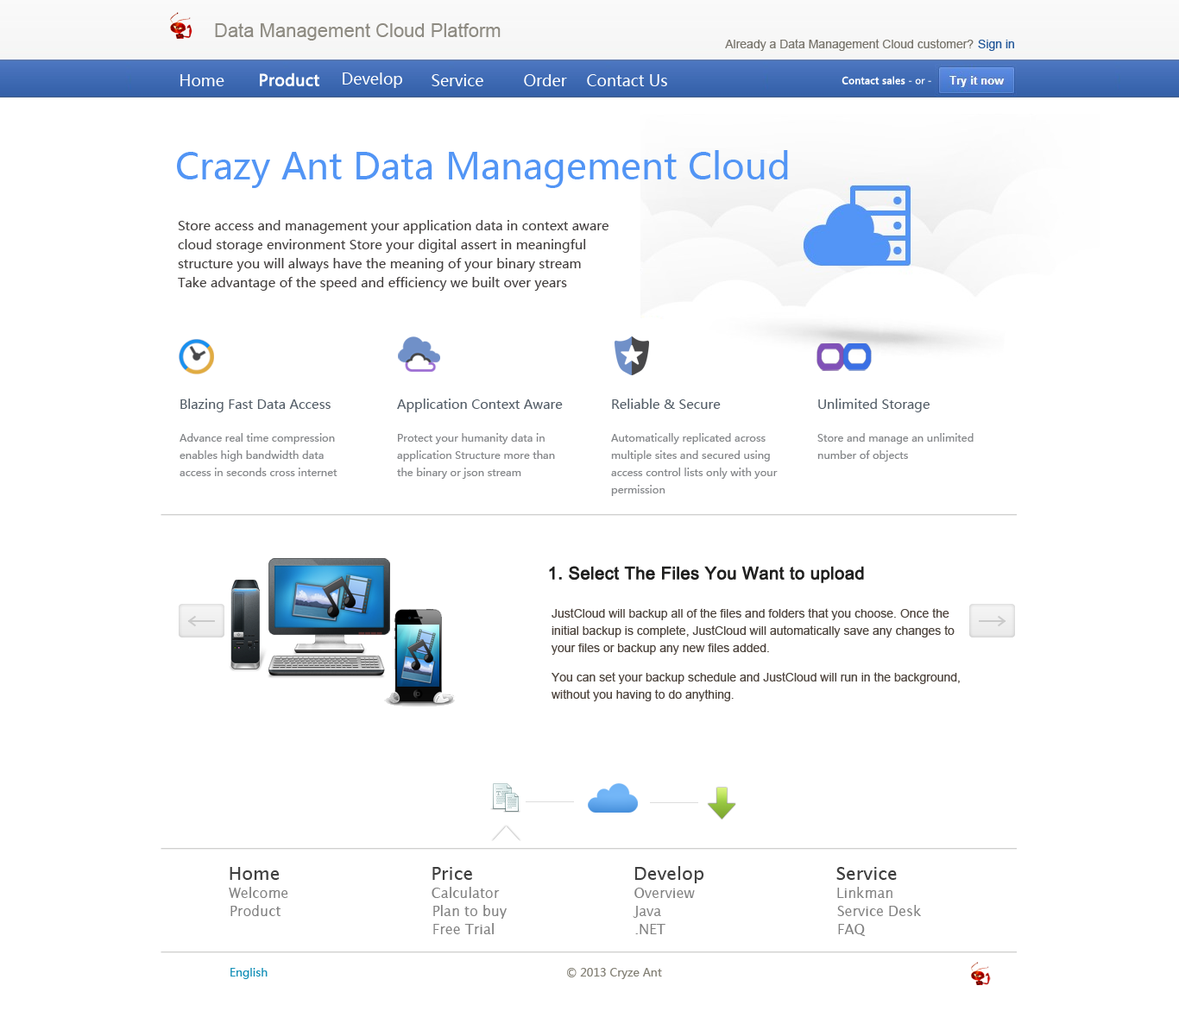
<style>
.page{position:relative;width:1179px;height:1011px;background:#ffffff}
.page>*{position:absolute;margin:0}
.t1{font:19px "ArialMT";color:#8e8b82}
.t2{font:12.1px "ArialMT";color:#77746b}
.t3{font:12.1px "ArialMT";color:#225799}
.t4{font:15.5px "MicrosoftYaHei";color:#ffffff}
.t5{font:15.5px "MicrosoftYaHei";color:#ffffff;font-weight:bold}
.t6{font:9.5px "MicrosoftYaHei";color:#ffffff;font-weight:bold}
.t7{font:9.5px "MicrosoftYaHei";color:#ffffff}
.t8{font:36.2px "MicrosoftYaHei";color:#5295f5}
.t9{font:12.9px/19px "MicrosoftYaHei";color:#433f3e}
.t10{font:12.9px "MicrosoftYaHei";color:#535d67}
.t11{font:10.4px/17.3px "MicrosoftYaHei";color:#85878a}
.t12{font:17.3px "ArialMT";color:#20201f;font-weight:bold}
.t13{font:12.1px/17.3px "ArialMT";color:#4e453e}
.t14{font:18.1px "LucidaSans";color:#404040}
.t15{font:18.1px "LucidaSans";color:#3f3f3f}
.t16{font:13.8px "LucidaSans";color:#818181}
.t17{font:11.2px "MicrosoftYaHei";color:#1791b8}
.t18{font:11.2px "MicrosoftYaHei";color:#827f74}
</style>
<div class="page">
<p class="t1" style="left:215px;top:23px;width:286px;height:18px">Data Management Cloud Platform</p>
<p class="t2" style="left:725px;top:39px;width:249px;height:12px">Already a Data Management Cloud customer?</p>
<p class="t3" style="left:978px;top:40px;width:36px;height:11px">Sign in</p>
<p class="t4" style="left:180px;top:74px;width:44px;height:12px">Home</p>
<p class="t5" style="left:260px;top:72px;width:59px;height:14px">Product</p>
<p class="t4" style="left:343px;top:72px;width:59px;height:16px">Develop</p>
<p class="t4" style="left:432px;top:74px;width:51px;height:12px">Service</p>
<p class="t4" style="left:524px;top:74px;width:43px;height:12px">Order</p>
<p class="t4" style="left:587px;top:74px;width:80px;height:12px">Contact Us</p>
<p class="t6" style="left:841px;top:76px;width:90px;height:9px">Contact sales<span class="t7"> - or -</span></p>
<p class="t8" style="left:177px;top:150px;width:611px;height:38px">Crazy Ant Data Management Cloud</p>
<p class="t9" style="left:178px;top:220px;width:430px;height:71px">Store access and management your application data in context aware <br>cloud storage environment Store your digital assert in meaningful <br>structure you will always have the meaning of your binary stream<br>Take advantage of the speed and efficiency we built over years</p>
<p class="t10" style="left:180px;top:399px;width:151px;height:14px">Blazing Fast Data Access</p>
<p class="t10" style="left:397px;top:399px;width:166px;height:14px">Application Context Aware</p>
<p class="t10" style="left:612px;top:399px;width:109px;height:10px">Reliable &amp; Secure</p>
<p class="t10" style="left:818px;top:399px;width:111px;height:14px">Unlimited Storage</p>
<p class="t11" style="left:180px;top:433px;width:157px;height:43px">Advance real time compression <br>enables high bandwidth data <br>access in seconds cross internet</p>
<p class="t11" style="left:397px;top:433px;width:158px;height:46px">Protect your humanity data in <br>application Structure more than <br>the binary or json stream</p>
<p class="t11" style="left:611px;top:433px;width:167px;height:63px">Automatically replicated across <br>multiple sites and secured using <br>access control lists only with your <br>permission</p>
<p class="t11" style="left:817px;top:433px;width:157px;height:29px">Store and manage an unlimited <br>number of objects</p>
<p class="t12" style="left:549px;top:566px;width:315px;height:17px">1. Select The Files You Want to upload</p>
<p class="t13" style="left:551px;top:608px;width:404px;height:47px">JustCloud will backup all of the files and folders that you choose. Once the <br>initial backup is complete, JustCloud will automatically save any changes to <br>your files or backup any new files added.</p>
<p class="t13" style="left:551px;top:672px;width:409px;height:30px">You can set your backup schedule and JustCloud will run in the background, <br>without you having to do anything.</p>
<p class="t14" style="left:230px;top:867px;width:50px;height:13px">Home</p>
<p class="t15" style="left:432px;top:867px;width:40px;height:13px">Price</p>
<p class="t14" style="left:634px;top:866px;width:70px;height:18px">Develop</p>
<p class="t15" style="left:836px;top:867px;width:61px;height:13px">Service</p>
<p class="t16" style="left:229px;top:887px;width:59px;height:11px">Welcome</p>
<p class="t16" style="left:432px;top:887px;width:68px;height:11px">Calculator</p>
<p class="t16" style="left:634px;top:888px;width:61px;height:10px">Overview</p>
<p class="t16" style="left:837px;top:887px;width:55px;height:11px">Linkman</p>
<p class="t16" style="left:230px;top:905px;width:50px;height:12px">Product</p>
<p class="t16" style="left:433px;top:905px;width:74px;height:14px">Plan to buy</p>
<p class="t16" style="left:837px;top:905px;width:84px;height:12px">Service Desk</p>
<p class="t16" style="left:633px;top:906px;width:28px;height:12px">Java</p>
<p class="t16" style="left:433px;top:923px;width:61px;height:12px">Free Trial</p>
<p class="t16" style="left:635px;top:924px;width:30px;height:11px">.NET</p>
<p class="t16" style="left:838px;top:924px;width:28px;height:13px">FAQ</p>
<p class="t17" style="left:230px;top:968px;width:38px;height:12px">English</p>
<p class="t18" style="left:567px;top:968px;width:95px;height:12px">© 2013 Cryze Ant</p>
</div>
